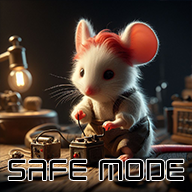
<style>
.page{position:relative;width:192px;height:192px}
.page>*{position:absolute;margin:0}
.t1{font:32px "RadioSpace";color:#000000}
</style>
<div class="page">
<p class="t1" style="left:8px;top:159px;width:176px;height:21px">SAFE MODE</p>
</div>
